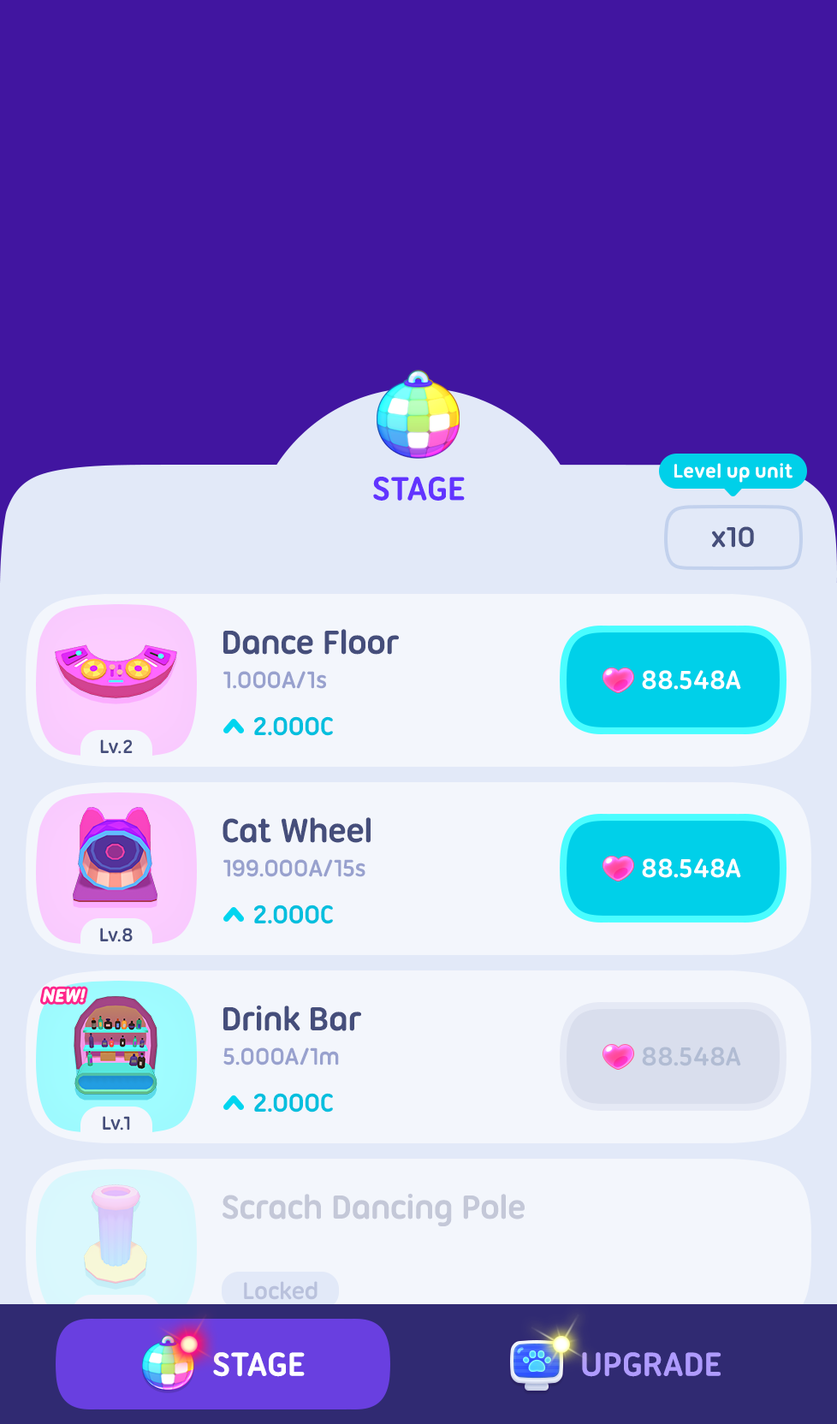
<style>
.page{position:relative;width:837px;height:1424px;background:#4115a0}
.page>*{position:absolute;margin:0}
.t1{font:20.5px "UbuntuTitling-Bold";letter-spacing:-0.025em;color:#ffffff}
.t2{font:36px "UbuntuTitling-Bold";letter-spacing:-0.025em;color:#6234ff;text-transform:uppercase}
.t3{font:30.8px "UbuntuTitling-Bold";letter-spacing:-0.025em;color:#454e7b}
.t4{font:36px "UbuntuTitling-Bold";letter-spacing:-0.025em;color:#454e7b}
.t5{font:25.7px "UbuntuTitling-Bold";letter-spacing:-0.025em;color:#8c96c9}
.t6{font:28.2px "UbuntuTitling-Bold";letter-spacing:-0.025em;color:#ffffff}
.t7{font:27.4px "UbuntuTitling-Bold";letter-spacing:-0.025em;color:#00bfde}
.t8{font:20.5px "UbuntuTitling-Bold";letter-spacing:-0.025em;color:#454e7b}
.t9{font:18.8px "UbuntuTitling-Bold";letter-spacing:-0.03em;color:#ffffff;text-transform:uppercase;font-weight:bold;font-style:italic}
.t10{font:28.2px "UbuntuTitling-Bold";letter-spacing:-0.025em;color:#b1bcd3}
.t11{font:36px "UbuntuTitling-Bold";letter-spacing:-0.025em;color:#c4c8d8}
.t12{font:25.7px "UbuntuTitling-Bold";letter-spacing:-0.025em;color:#b9c1dc}
.t13{font:36px "UbuntuTitling-Bold";letter-spacing:-0.025em;color:#ffffff;text-transform:uppercase}
.t14{font:36px "UbuntuTitling-Bold";letter-spacing:-0.025em;color:#af9bff;text-transform:uppercase}
</style>
<div class="page">
<p class="t1" style="left:675px;top:463px;width:118px;height:20px">Level up unit</p>
<p class="t2" style="left:373px;top:477px;width:92px;height:24px">Stage</p>
<p class="t3" style="left:712px;top:526px;width:42px;height:22px">x10</p>
<p class="t4" style="left:223px;top:629px;width:176px;height:26px">Dance Floor</p>
<p class="t5" style="left:223px;top:671px;width:103px;height:18px;opacity:0.9">1.000A/1s</p>
<p class="t6" style="left:642px;top:670px;width:99px;height:20px">88.548A</p>
<p class="t7" style="left:254px;top:716px;width:79px;height:20px">2.000C</p>
<p class="t8" style="left:100px;top:740px;width:33px;height:14px">Lv.2</p>
<p class="t4" style="left:223px;top:817px;width:148px;height:26px">Cat Wheel</p>
<p class="t5" style="left:223px;top:859px;width:143px;height:18px;opacity:0.9">199.000A/15s</p>
<p class="t6" style="left:642px;top:859px;width:99px;height:19px">88.548A</p>
<p class="t7" style="left:254px;top:905px;width:79px;height:19px">2.000C</p>
<p class="t8" style="left:100px;top:928px;width:33px;height:14px">Lv.8</p>
<p class="t9" style="left:43px;top:989px;width:43px;height:13px">New!</p>
<p class="t4" style="left:223px;top:1005px;width:138px;height:26px">Drink Bar</p>
<p class="t5" style="left:223px;top:1048px;width:116px;height:18px;opacity:0.9">5.000A/1m</p>
<p class="t10" style="left:642px;top:1047px;width:99px;height:20px">88.548A</p>
<p class="t7" style="left:254px;top:1093px;width:79px;height:20px">2.000C</p>
<p class="t8" style="left:103px;top:1116px;width:27px;height:15px">Lv.1</p>
<p class="t11" style="left:223px;top:1193px;width:302px;height:34px">Scrach Dancing Pole</p>
<p class="t12" style="left:244px;top:1281px;width:74px;height:19px">Locked</p>
<p class="t13" style="left:213px;top:1352px;width:92px;height:25px">Stage</p>
<p class="t14" style="left:582px;top:1352px;width:140px;height:25px">Upgrade</p>
</div>
